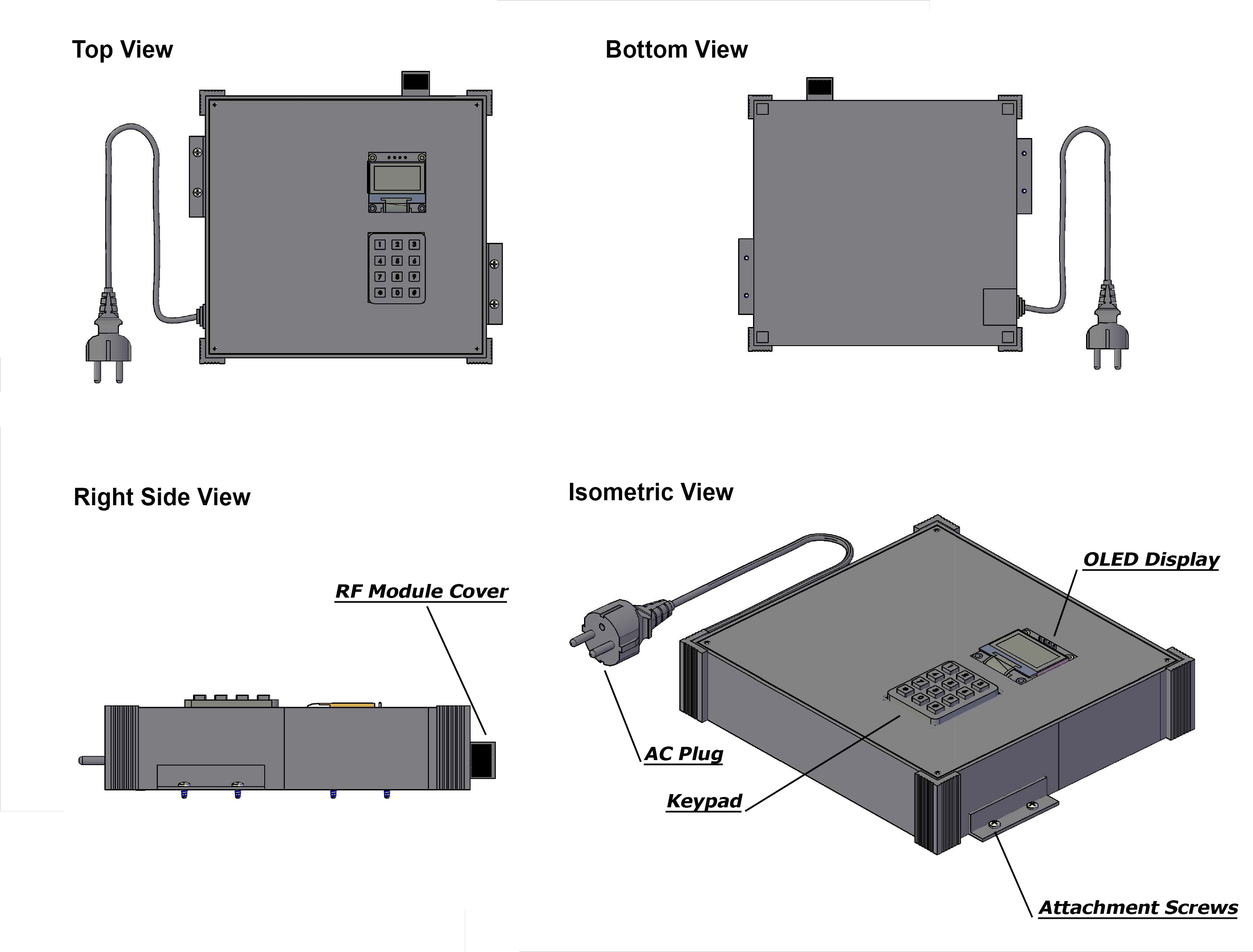
<style>
.page{position:relative;width:1253px;height:952px;background:#ffffff}
.page>*{position:absolute;margin:0}
.t1{font:23.9px "Arial-BoldMT";color:#060606}
.t2{font:18.1px "Tahoma-Bold";color:#060606;font-style:italic;text-decoration:underline;scale:1.13 1}
</style>
<div class="page">
<p class="t1" style="left:72px;top:40px;width:102px;height:23px">Top View</p>
<p class="t1" style="left:607px;top:40px;width:142px;height:18px">Bottom View</p>
<p class="t1" style="left:570px;top:483px;width:164px;height:17px">Isometric View</p>
<p class="t1" style="left:75px;top:487px;width:176px;height:23px">Right Side View</p>
<p class="t2" style="left:1082px;top:552px;width:139px;height:19px">OLED Display</p>
<p class="t2" style="left:334px;top:584px;width:175px;height:19px">RF Module Cover</p>
<p class="t2" style="left:644px;top:746px;width:80px;height:19px">AC Plug</p>
<p class="t2" style="left:665px;top:793px;width:78px;height:19px">Keypad</p>
<p class="t2" style="left:1038px;top:900px;width:201px;height:19px">Attachment Screws</p>
</div>
